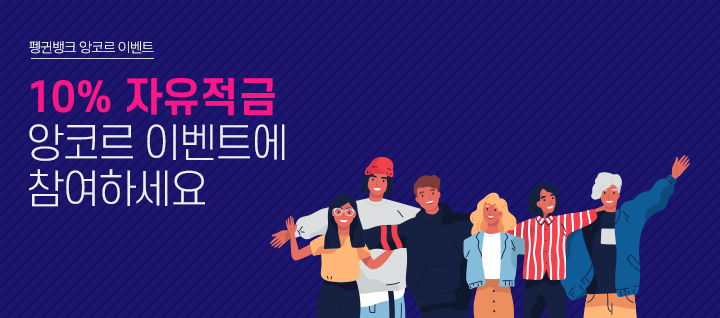
<style>
.page{position:relative;width:720px;height:318px;background:#1c166c}
.page>*{position:absolute;margin:0}
.t1{font:14px "Arita-dotum-Medium_TTF";letter-spacing:-0.06em;color:#ffffff}
.t2{font:40px/46px "S-CoreDream-3Light";letter-spacing:-0.06em;color:#eeeeee}
.t3{font:40px/46px "S-CoreDream-6Bold";color:#fc1688}
</style>
<div class="page">
<p class="t1" style="left:29px;top:41px;width:125px;height:13px">펭귄뱅크 앙코르 이벤트</p>
<p class="t2" style="left:29px;top:78px;width:256px;height:129px"><span class="t3">10% 자유적금<br></span>앙코르 이벤트에<br>참여하세요</p>
</div>
